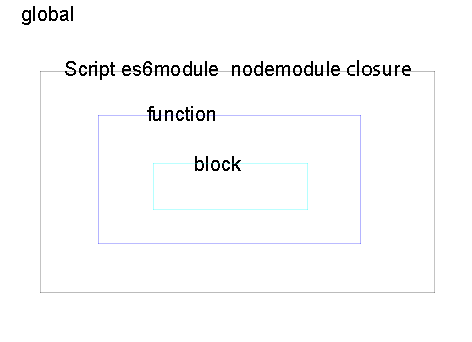
<style>
.page{position:relative;width:472px;height:342px;background:#ffffff}
.page>*{position:absolute;margin:0}
.t1{font:20.1px "ArialMT";color:#000000}
.t2{font:20.1px "AdobeHeitiStd-Regular";color:#000000}
</style>
<div class="page">
<p class="t1" style="left:22px;top:6px;width:51px;height:19px">global</p>
<p class="t1" style="left:65px;top:60px;width:346px;height:20px">Script es6module  nodemodule<span class="t2"> closure</span></p>
<p class="t1" style="left:147px;top:106px;width:68px;height:15px">function</p>
<p class="t1" style="left:195px;top:156px;width:46px;height:15px">block</p>
</div>
